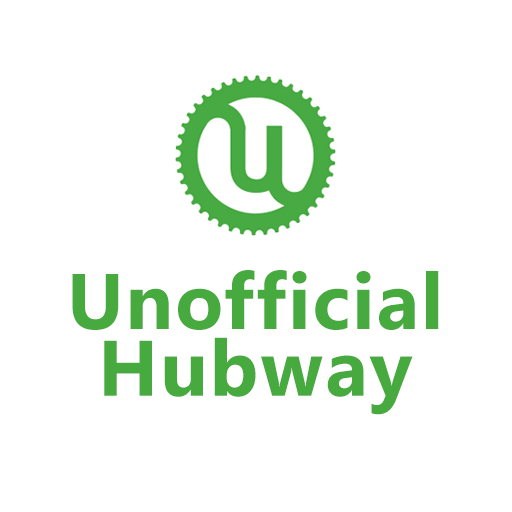
<style>
.page{position:relative;width:512px;height:512px;background:#ffffff}
.page>*{position:absolute;margin:0}
.t1{font:78.4px/66.9px "NirmalaUI-Bold";letter-spacing:0.025em;color:#47aa3e}
</style>
<div class="page">
<p class="t1" style="left:72px;top:270px;width:367px;height:145px;text-align:center">Unofficial<br>Hubway</p>
</div>
